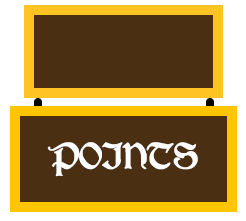
<style>
.page{position:relative;width:246px;height:221px;background:#4b2f12}
.page>*{position:absolute;margin:0}
.t1{font:41.7px "Augusta-Regular";color:#ffffff}
</style>
<div class="page">
<p class="t1" style="left:47px;top:142px;width:151px;height:35px">POINTS</p>
</div>
